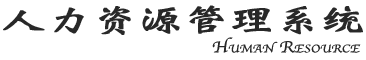
<style>
.page{position:relative;width:366px;height:60px;background:#ffffff}
.page>*{position:absolute;margin:0}
.t1{font:32.2px "Weibei-SC-Bold";color:#282828;font-weight:bold;scale:1.38 1}
.t2{font:16.5px "Apple-Chancery";color:#282828;font-variant:small-caps;scale:1.15 1}
</style>
<div class="page">
<p class="t1" style="left:3px;top:5px;width:360px;height:30px">人力资源管理系统</p>
<p class="t2" style="left:212px;top:37px;width:149px;height:16px">Human Resource</p>
</div>
